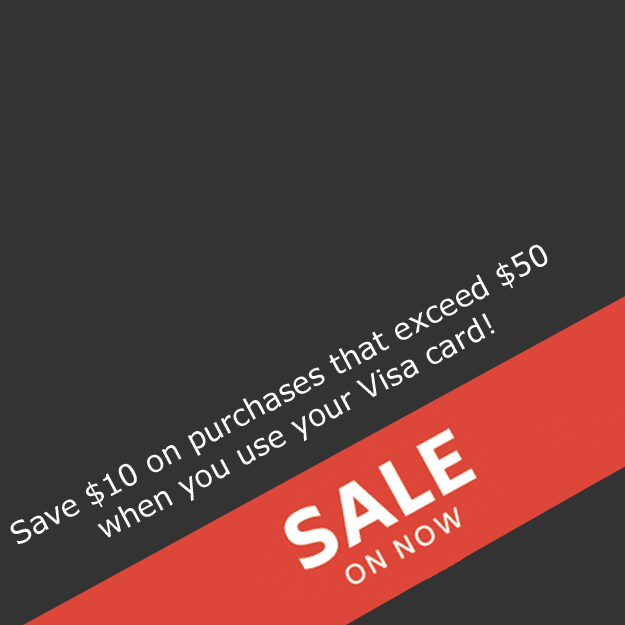
<style>
.page{position:relative;width:625px;height:625px;background:#333333}
.page>*{position:absolute;margin:0}
.t1{font:30px "Verdana";color:#ffffff}
</style>
<div class="page">
<p class="t1" style="left:10px;top:244px;width:538px;height:300px;rotate:-28deg">Save $10 on purchases that exceed $50 when you use your Visa card!</p>
</div>
